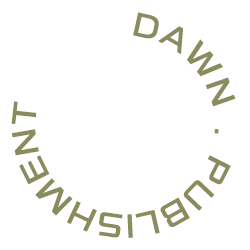
<style>
.page{position:relative;width:250px;height:250px;background:#ffffff}
.page>*{position:absolute;margin:0}
.t1{font:31px "KIMMBold";letter-spacing:0.025em;color:#8a8c5d}
</style>
<div class="page">
<p class="t1" style="left:11px;top:12px;width:225px;height:226px">DAWN  .  PUBLISHMENT</p>
</div>
